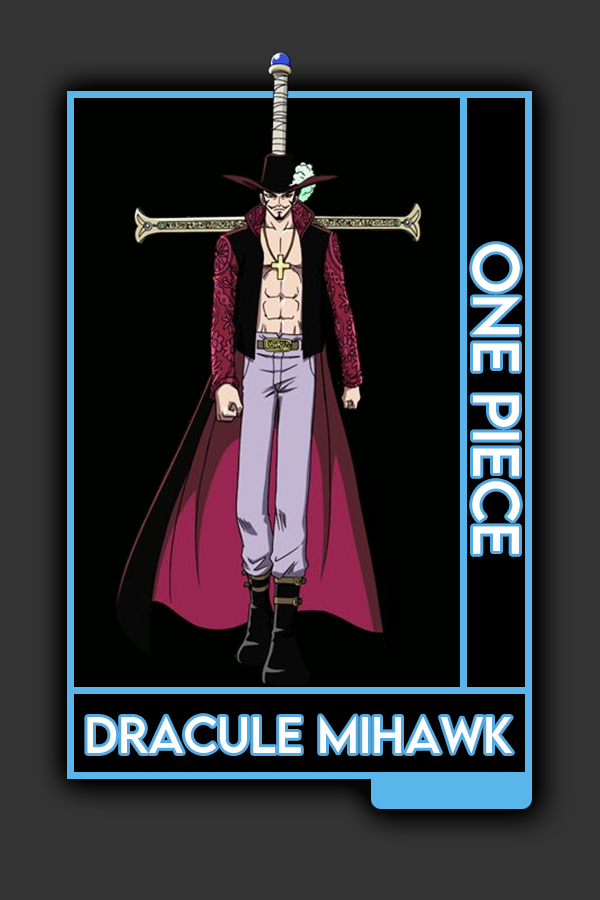
<style>
.page{position:relative;width:600px;height:900px;background:#000200}
.page>*{position:absolute;margin:0}
.t1{font:58.4px "LEMONMILK-Regular";color:#ffffff}
.t2{font:45.6px "LEMONMILK-Regular";color:#ffffff}
</style>
<div class="page">
<p class="t1" style="left:472px;top:244px;width:48px;height:310px;rotate:90deg">One Piece</p>
<p class="t2" style="left:87px;top:716px;width:425px;height:37px">Dracule Mihawk</p>
</div>
